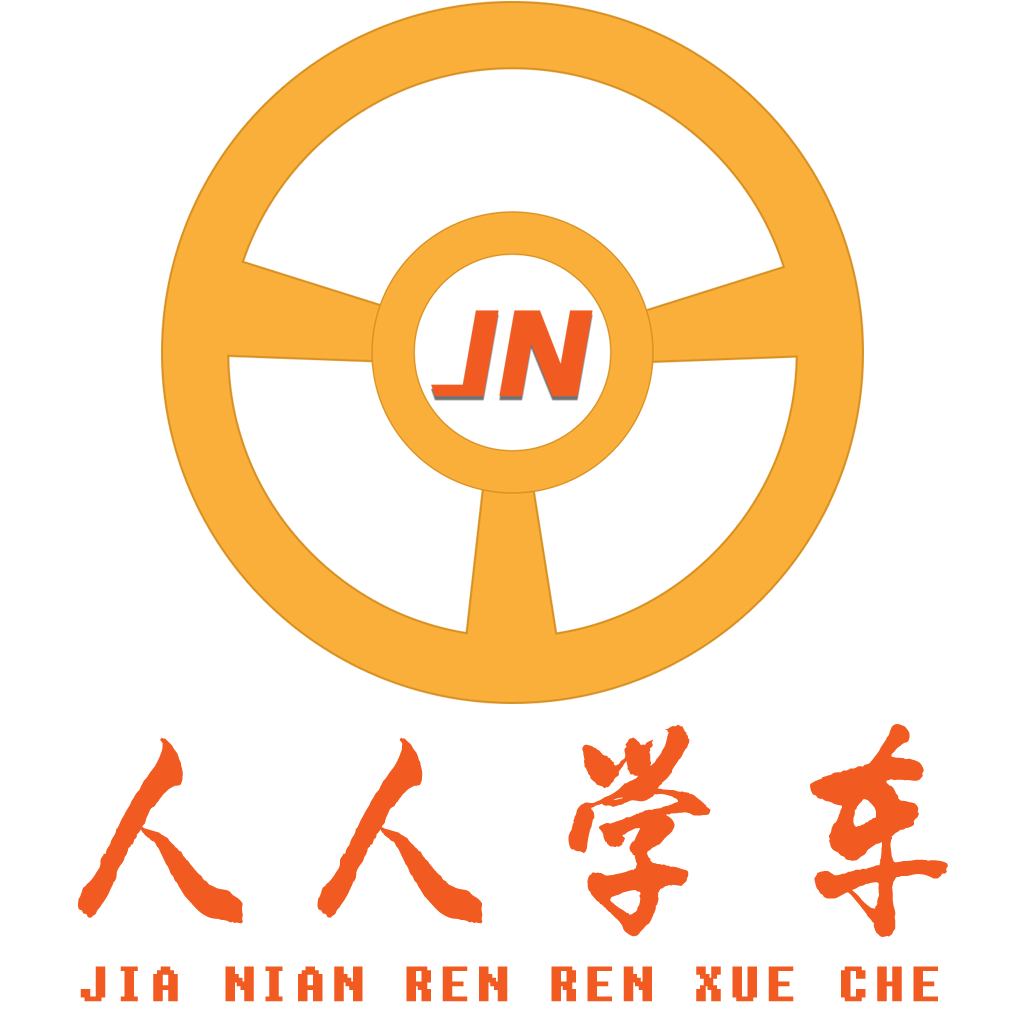
<style>
.page{position:relative;width:1024px;height:1024px;background:#ffffff}
.page>*{position:absolute;margin:0}
.t1{font:212.5px "LiXuKe";letter-spacing:0.1em;color:#f15a20;font-weight:bold}
.t2{font:60.1px "Fixedsys";letter-spacing:0.1em;color:#f15a20;font-weight:bold}
</style>
<div class="page">
<p class="t1" style="left:78px;top:724px;width:870px;height:213px">人人学车</p>
<p class="t2" style="left:80px;top:966px;width:858px;height:36px">JIA NIAN REN REN XUE CHE</p>
</div>
